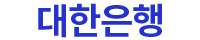
<style>
.page{position:relative;width:200px;height:40px;background:#ffffff}
.page>*{position:absolute;margin:0}
.t1{font:36px "NotoSansKR-Bold";letter-spacing:-0.025em;color:#2632ce;text-transform:uppercase}
</style>
<div class="page">
<p class="t1" style="left:38px;top:3px;width:124px;height:35px">대한은행</p>
</div>
